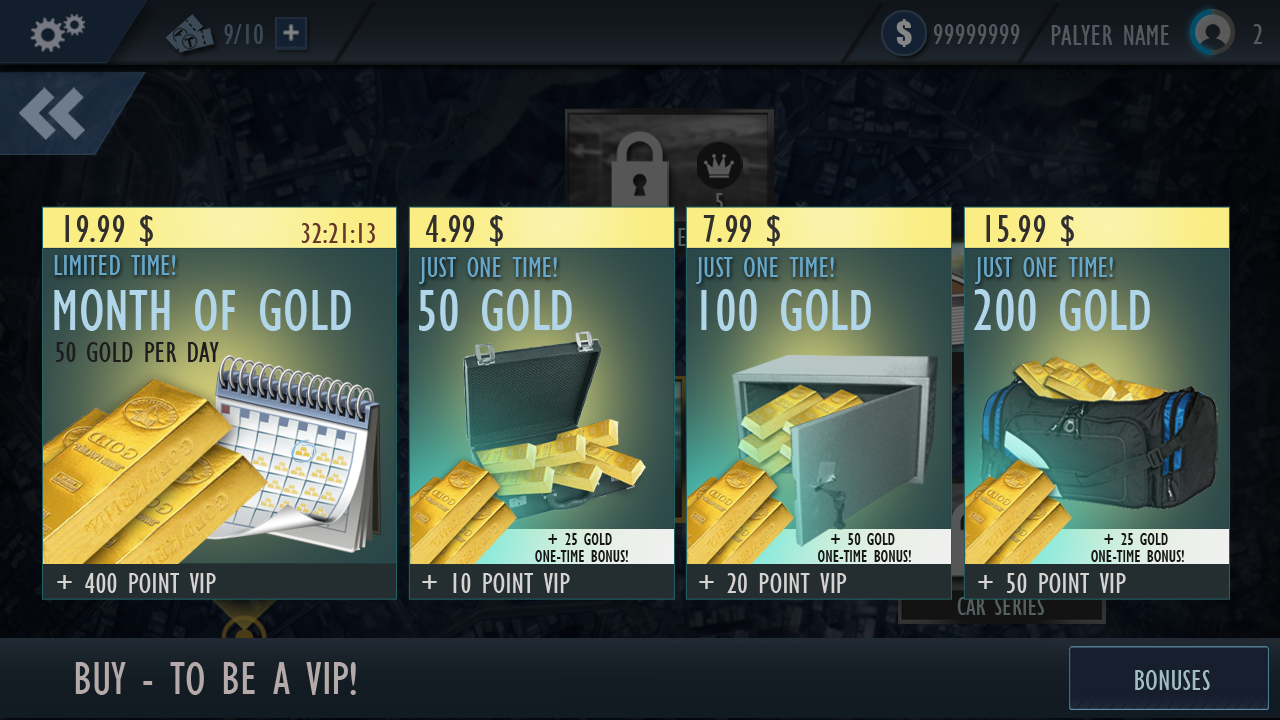
<style>
.page{position:relative;width:1280px;height:720px}
.page>*{position:absolute;margin:0}
.t1{font:40px "GillSansMT-Condensed";color:#322f2f}
.t2{font:30px "GillSansMT-Condensed";color:#673729}
.t3{font:30px "GillSansMT-Condensed";color:#67a8ca}
.t4{font:60px "GillSansMT-Condensed";color:#b1d6e9}
.t5{font:30px "GillSansMT-Condensed";color:#1d1d1d}
.t6{font:18px "GillSansMT-Condensed";color:#171616}
.t7{font:30px "GillSansMT-Condensed";color:#d6d3d3}
.t8{font:48px "GillSansMT-Condensed";color:#b4aaaa}
.t9{font:30px "GillSansMT-Condensed";color:#a2bec0}
</style>
<div class="page">
<p class="t1" style="left:65px;top:215px;width:88px;height:31px">19.99 $</p>
<p class="t1" style="left:426px;top:215px;width:77px;height:31px">4.99 $</p>
<p class="t1" style="left:703px;top:215px;width:77px;height:31px">7.99 $</p>
<p class="t1" style="left:986px;top:215px;width:88px;height:31px">15.99 $</p>
<p class="t2" style="left:301px;top:223px;width:74px;height:20px">32:21:13</p>
<p class="t3" style="left:54px;top:255px;width:122px;height:20px">LIMITED TIME!</p>
<p class="t3" style="left:419px;top:257px;width:138px;height:27px">JUST ONE TIME!</p>
<p class="t3" style="left:696px;top:257px;width:138px;height:27px">JUST ONE TIME!</p>
<p class="t3" style="left:975px;top:257px;width:138px;height:27px">JUST ONE TIME!</p>
<p class="t4" style="left:54px;top:289px;width:297px;height:42px">MONTH OF GOLD</p>
<p class="t4" style="left:419px;top:289px;width:153px;height:42px">50 GOLD</p>
<p class="t4" style="left:701px;top:289px;width:170px;height:42px">100 GOLD</p>
<p class="t4" style="left:974px;top:289px;width:176px;height:42px">200 GOLD</p>
<p class="t5" style="left:56px;top:342px;width:163px;height:20px">50 GOLD PER DAY</p>
<p class="t6" style="left:548px;top:533px;width:64px;height:12px">+ 25 GOLD</p>
<p class="t6" style="left:831px;top:533px;width:64px;height:12px">+ 50 GOLD</p>
<p class="t6" style="left:1104px;top:533px;width:64px;height:12px">+ 25 GOLD</p>
<p class="t6" style="left:535px;top:550px;width:93px;height:12px">ONE-TIME BONUS!</p>
<p class="t6" style="left:818px;top:550px;width:93px;height:12px">ONE-TIME BONUS!</p>
<p class="t6" style="left:1091px;top:550px;width:93px;height:12px">ONE-TIME BONUS!</p>
<p class="t7" style="left:57px;top:573px;width:159px;height:20px">+ 400 POINT VIP</p>
<p class="t7" style="left:422px;top:573px;width:148px;height:20px">+ 10 POINT VIP</p>
<p class="t7" style="left:699px;top:573px;width:148px;height:20px">+ 20 POINT VIP</p>
<p class="t7" style="left:978px;top:573px;width:148px;height:20px">+ 50 POINT VIP</p>
<p class="t8" style="left:75px;top:662px;width:281px;height:33px">BUY - TO BE A VIP!</p>
<p class="t9" style="left:1135px;top:670px;width:75px;height:20px">BONUSES</p>
</div>
